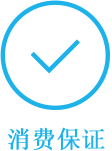
<style>
.page{position:relative;width:112px;height:151px;background:#ffffff}
.page>*{position:absolute;margin:0}
.t1{font:24px "SimSun";letter-spacing:0.01em;color:#1db2ea;font-weight:bold}
</style>
<div class="page">
<p class="t1" style="left:8px;top:127px;width:97px;height:23px">消费保证</p>
</div>
